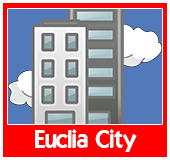
<style>
.page{position:relative;width:170px;height:160px;background:#ff0000}
.page>*{position:absolute;margin:0}
.t1{font:24px "ELEGANCE";color:#ffffff}
</style>
<div class="page">
<p class="t1" style="left:35px;top:129px;width:102px;height:23px">Euclia City</p>
</div>
